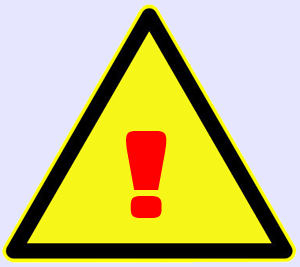
<style>
.page{position:relative;width:300px;height:267px;background:#e6e6ff}
.page>*{position:absolute;margin:0}
.t1{font:120px "AntiqueOlive-Compact";color:#ff0000}
</style>
<div class="page">
<p class="t1" style="left:126px;top:131px;width:41px;height:87px">!</p>
</div>
